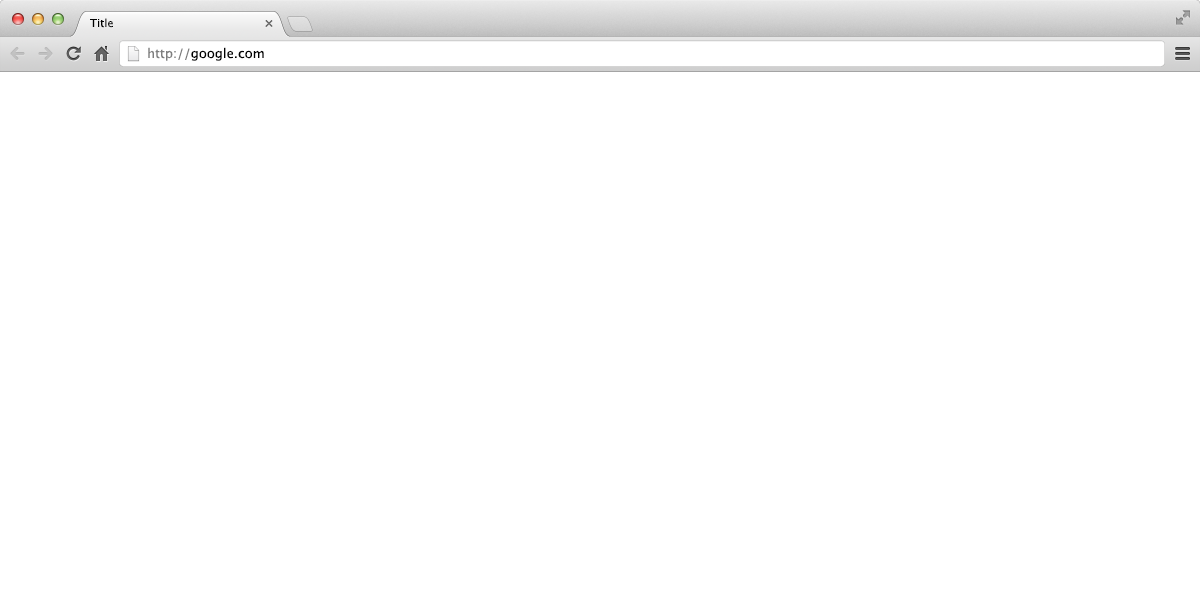
<style>
.page{position:relative;width:1200px;height:600px;background:#ffffff}
.page>*{position:absolute;margin:0}
.t1{font:11px "LucidaGrande";color:#000000}
.t2{font:13px "LucidaGrande";color:#000000}
.t3{font:13px "LucidaGrande";color:#7e7e7e}
</style>
<div class="page">
<p class="t1" style="left:90px;top:18px;width:23px;height:10px">Title</p>
<p class="t2" style="left:148px;top:47px;width:116px;height:14px"><span class="t3">http://</span>google.com</p>
</div>
